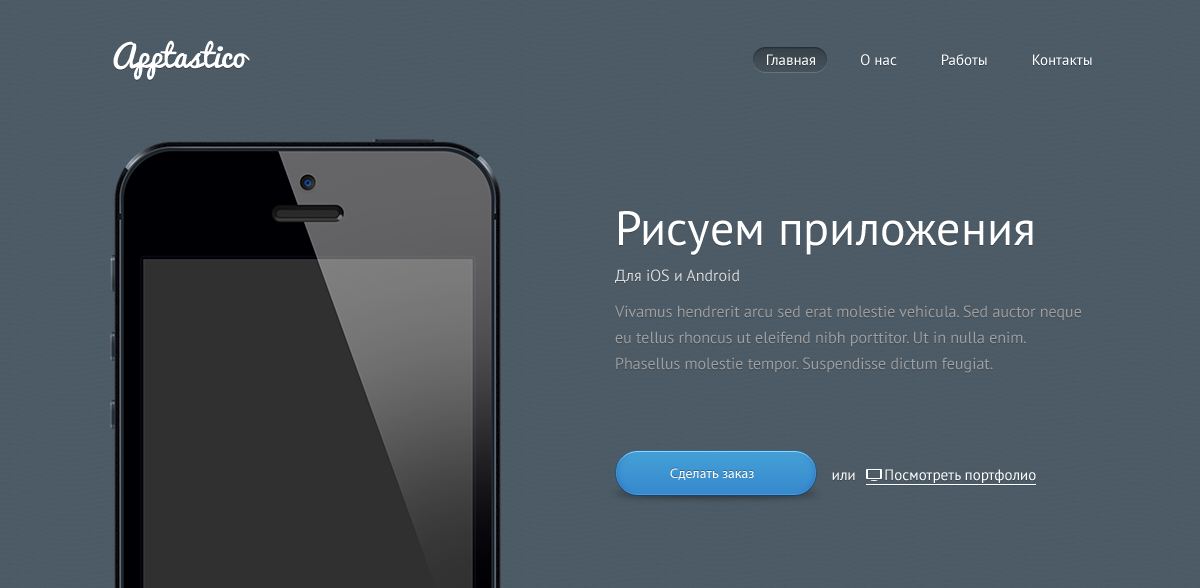
<style>
.page{position:relative;width:1200px;height:588px}
.page>*{position:absolute;margin:0}
.t1{font:31px "Pacifico";color:#ffffff}
.t2{font:15px "PTSans-Regular";color:#ffffff}
.t3{font:16px/26px "PTSans-Regular";color:#a0a0a0}
.t4{font:48px/40px "PTSans-Regular";color:#ffffff}
.t5{font:16px/36px "PTSans-Regular";color:#dcdcdc}
.t6{font:16px/36px "PTSans-Regular";color:#a0a0a0}
.t7{font:14px "MyriadPro-Regular";color:#ffffff}
</style>
<div class="page">
<p class="t1" style="left:113px;top:40px;width:137px;height:40px">Apptastico</p>
<p class="t2" style="left:767px;top:54px;width:325px;height:12px">Главная           О нас           Работы           Контакты</p>
<p class="t3" style="left:615px;top:211px;width:466px;height:162px"><span class="t4">Рисуем приложения<br></span><span class="t5">Для iOS и Android<br></span><span class="t6">Vivamus hendrerit arcu sed erat molestie vehicula. Sed auctor </span>neque eu tellus rhoncus ut eleifend nibh porttitor. Ut in nulla enim. Phasellus molestie tempor. Suspendisse dictum feugiat.</p>
<p class="t7" style="left:670px;top:468px;width:84px;height:12px">Сделать заказ</p>
<p class="t2" style="left:832px;top:469px;width:204px;height:14px">или         Посмотреть портфолио</p>
</div>
